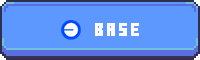
<style>
.page{position:relative;width:200px;height:60px;background:#5c98ff}
.page>*{position:absolute;margin:0}
.t1{font:18.2px "MinecraftTen";letter-spacing:0.2em;color:#ffffff;scale:0.86 1}
</style>
<div class="page">
<p class="t1" style="left:95px;top:23px;width:44px;height:13px">BASE</p>
</div>
